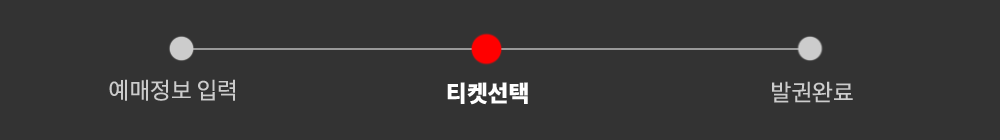
<style>
.page{position:relative;width:1000px;height:140px;background:#333333}
.page>*{position:absolute;margin:0}
.t1{font:24px "TossProductSansTTF-Medium";color:#cccccc}
.t2{font:24px "TossProductSansTTF-Heavy";color:#ffffff}
</style>
<div class="page">
<p class="t1" style="left:109px;top:79px;width:126px;height:22px">예매정보 입력</p>
<p class="t2" style="left:447px;top:82px;width:81px;height:23px">티켓선택</p>
<p class="t1" style="left:772px;top:81px;width:81px;height:22px">발권완료</p>
</div>
